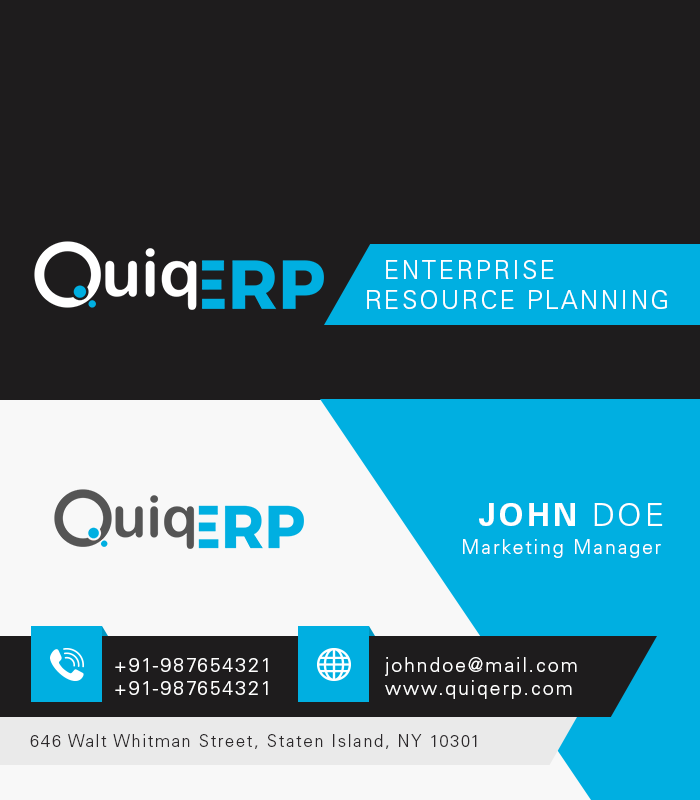
<style>
.page{position:relative;width:700px;height:800px;background:#1e1c1d}
.page>*{position:absolute;margin:0}
.t1{font:25px "UniversLTStd-Light";letter-spacing:0.1em;color:#ffffff;text-transform:uppercase}
.t2{font:31.4px "UniversLTStd-Bold";letter-spacing:0.1em;color:#ffffff;text-transform:uppercase}
.t3{font:31.4px "UniversLTStd-Light";letter-spacing:0.1em;color:#ffffff;text-transform:uppercase}
.t4{font:19.4px "UniversLTStd-Light";letter-spacing:0.1em;color:#ffffff}
.t5{font:16.7px "UniversLTStd-Light";letter-spacing:0.1em;color:#2c292b}
</style>
<div class="page">
<p class="t1" style="left:367px;top:260px;width:300px;height:49px">Enterprise<br>Resource Planning</p>
<p class="t2" style="left:479px;top:503px;width:184px;height:23px">John<span class="t3"> Doe</span></p>
<p class="t4" style="left:463px;top:539px;width:198px;height:19px">Marketing Manager</p>
<p class="t4" style="left:115px;top:658px;width:153px;height:14px">+91-987654321</p>
<p class="t4" style="left:385px;top:657px;width:192px;height:19px">johndoe@mail.com</p>
<p class="t4" style="left:115px;top:681px;width:153px;height:14px">+91-987654321</p>
<p class="t4" style="left:385px;top:680px;width:187px;height:19px">www.quiqerp.com</p>
<p class="t5" style="left:30px;top:734px;width:447px;height:15px">646 Walt Whitman Street, Staten Island, NY 10301</p>
</div>
